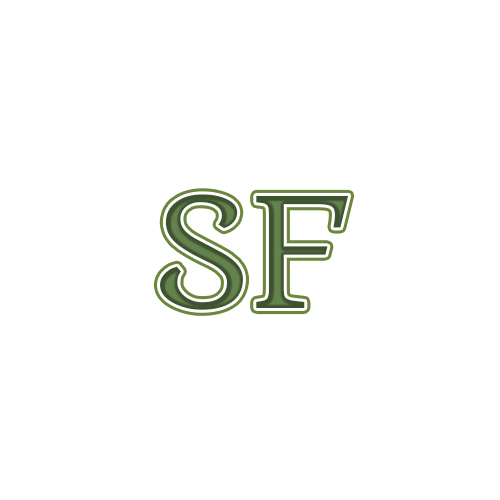
<style>
.page{position:relative;width:500px;height:500px;background:#ffffff}
.page>*{position:absolute;margin:0}
.t1{font:150px "Metamorphous"}
</style>
<div class="page">
<p class="t1" style="left:160px;top:194px;width:189px;height:116px">SF</p>
</div>
